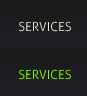
<style>
.page{position:relative;width:87px;height:96px}
.page>*{position:absolute;margin:0}
.t1{font:12.6px "Aller-Light";color:#ebe8d0}
.t2{font:12.6px "Aller-Light";color:#83f901}
</style>
<div class="page">
<p class="t1" style="left:19px;top:21px;width:52px;height:11px">SERVICES</p>
<p class="t2" style="left:19px;top:69px;width:52px;height:11px">SERVICES</p>
</div>
